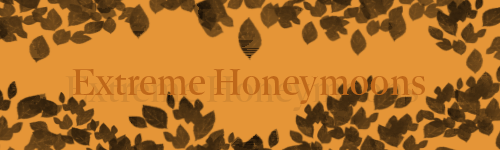
<style>
.page{position:relative;width:500px;height:150px;background:#e59537}
.page>*{position:absolute;margin:0}
.t1{font:38.1px "DejanireHeadline-Regular";color:#bf681a}
</style>
<div class="page">
<p class="t1" style="left:72px;top:69px;width:353px;height:35px">Extreme Honeymoons</p>
</div>
